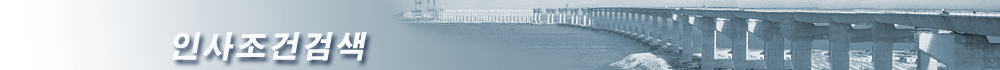
<style>
.page{position:relative;width:1000px;height:70px}
.page>*{position:absolute;margin:0}
.t1{font:30px "H2gtrE";letter-spacing:0.1em;color:#f9fafb;font-style:italic}
</style>
<div class="page">
<p class="t1" style="left:173px;top:32px;width:194px;height:29px">인사조건검색</p>
</div>
